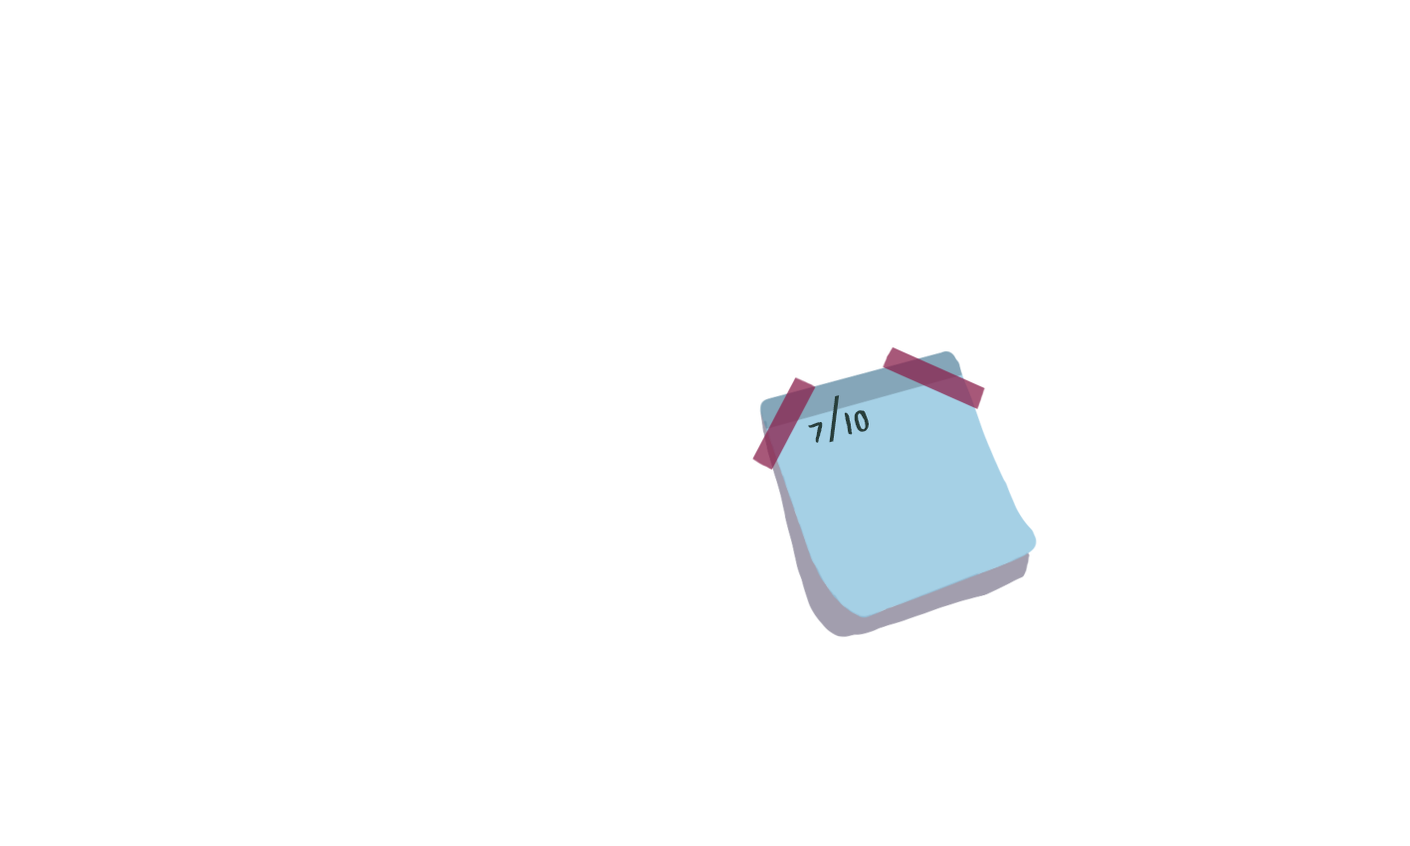
<style>
.page{position:relative;width:1410px;height:846px;background:#ffffff}
.page>*{position:absolute;margin:0}
.t1{font:59.7px "BabyFox";color:#283e3b;text-transform:uppercase}
.t2{font:59.7px "MyriadPro-Regular";color:#283e3b;text-transform:uppercase}
</style>
<div class="page">
<p class="t1" style="left:808px;top:395px;width:61px;height:48px;rotate:-14deg">7<span class="t2">/</span>10</p>
</div>
